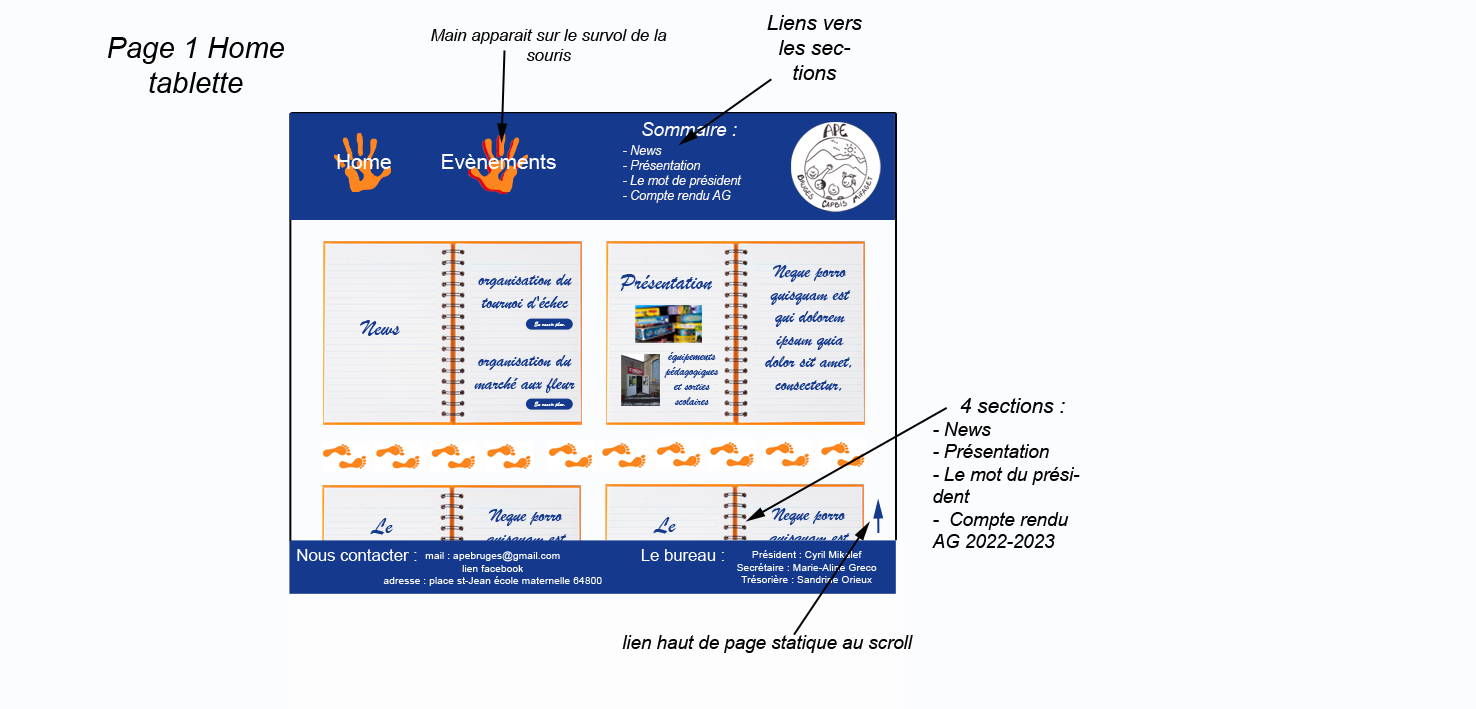
<style>
.page{position:relative;width:1476px;height:709px;background:#fbfcfe}
.page>*{position:absolute;margin:0}
.t1{font:20.8px "Arial-ItalicMT";color:#020202}
.t2{font:16.7px "Arial-ItalicMT";color:#020202}
.t3{font:29.2px "Arial-ItalicMT";color:#020202}
.t4{font:18.8px "Arial-ItalicMT";color:#fbf8f8}
.t5{font:12.5px "Arial-ItalicMT";color:#fbf8f8}
.t6{font:20.8px "ArialMT";color:#fdfeff}
.t7{font:18.8px "BrushScriptMT";color:#14398d}
.t8{font:22.9px "BrushScriptMT";color:#14398d}
.t9{font:6.2px "BrushScriptMT";color:#ffffff}
.t10{font:6.2px "BrushScriptMT";color:#14398d}
.t11{font:12.5px "BrushScriptMT";color:#14398d}
.t12{font:18.7px "Arial-ItalicMT";color:#020202}
.t13{font:16.7px "ArialMT";color:#ffffff}
.t14{font:10.4px "ArialMT";color:#ffffff}
.t15{font:18.8px "Arial-ItalicMT";color:#020202}
</style>
<div class="page">
<p class="t1" style="left:767px;top:15px;width:95px;height:65px;text-align:center">Liens vers les sections</p>
<p class="t2" style="left:431px;top:29px;width:236px;height:32px;text-align:center">Main apparait sur le survol de la souris</p>
<p class="t3" style="left:108px;top:37px;width:176px;height:56px;text-align:center">Page 1 Home<br>tablette</p>
<p class="t4" style="left:642px;top:122px;width:95px;height:14px">Sommaire :</p>
<p class="t5" style="left:623px;top:145px;width:119px;height:58px">- News <br>- Présentation  <br>- Le mot de président <br>- Compte rendu AG</p>
<p class="t6" style="left:337px;top:154px;width:54px;height:15px">Home</p>
<p class="t6" style="left:442px;top:154px;width:114px;height:15px">Evènements</p>
<p class="t7" style="left:765px;top:265px;width:87px;height:126px;text-align:center">Neque porro quisquam est qui dolorem ipsum quia  dolor sit amet, consectetur, adipisci velit...</p>
<p class="t7" style="left:478px;top:274px;width:94px;height:35px;text-align:center">organisation du tournoi d'échec</p>
<p class="t8" style="left:620px;top:274px;width:93px;height:17px">Présentation</p>
<p class="t8" style="left:360px;top:320px;width:40px;height:16px">News</p>
<p class="t9" style="left:534px;top:321px;width:35px;height:6px">En savoir plus.<span class="t10">..</span></p>
<p class="t11" style="left:664px;top:352px;width:55px;height:53px;text-align:center">équipements pédagogiques et sorties scolaires</p>
<p class="t7" style="left:474px;top:355px;width:101px;height:38px;text-align:center">organisation du marché aux fleur</p>
<p class="t9" style="left:534px;top:401px;width:35px;height:6px">En savoir plus.<span class="t10">..</span></p>
<p class="t12" style="left:932px;top:398px;width:148px;height:150px;text-align:center"><span class="t1">4 sections :<br></span>- News<br>- Présentation<br>- Le mot du président<br>-  Compte rendu AG 2022-2023</p>
<p class="t8" style="left:370px;top:518px;width:23px;height:17px">Le</p>
<p class="t8" style="left:653px;top:517px;width:23px;height:17px">Le</p>
<p class="t13" style="left:297px;top:549px;width:120px;height:12px">Nous contacter :</p>
<p class="t14" style="left:383px;top:551px;width:219px;height:35px;text-align:center">mail : apebruges@gmail.com  <br>lien facebook <br>adresse : place st-Jean école maternelle 64800 Bruges</p>
<p class="t13" style="left:641px;top:549px;width:83px;height:12px">Le bureau :</p>
<p class="t14" style="left:737px;top:550px;width:140px;height:33px;text-align:center">Président : Cyril Mikalef<br>Secrétaire : Marie-Aline Greco<br>Trésorière : Sandrine Orieux</p>
<p class="t15" style="left:622px;top:635px;width:291px;height:18px">lien haut de page statique au scroll</p>
</div>
